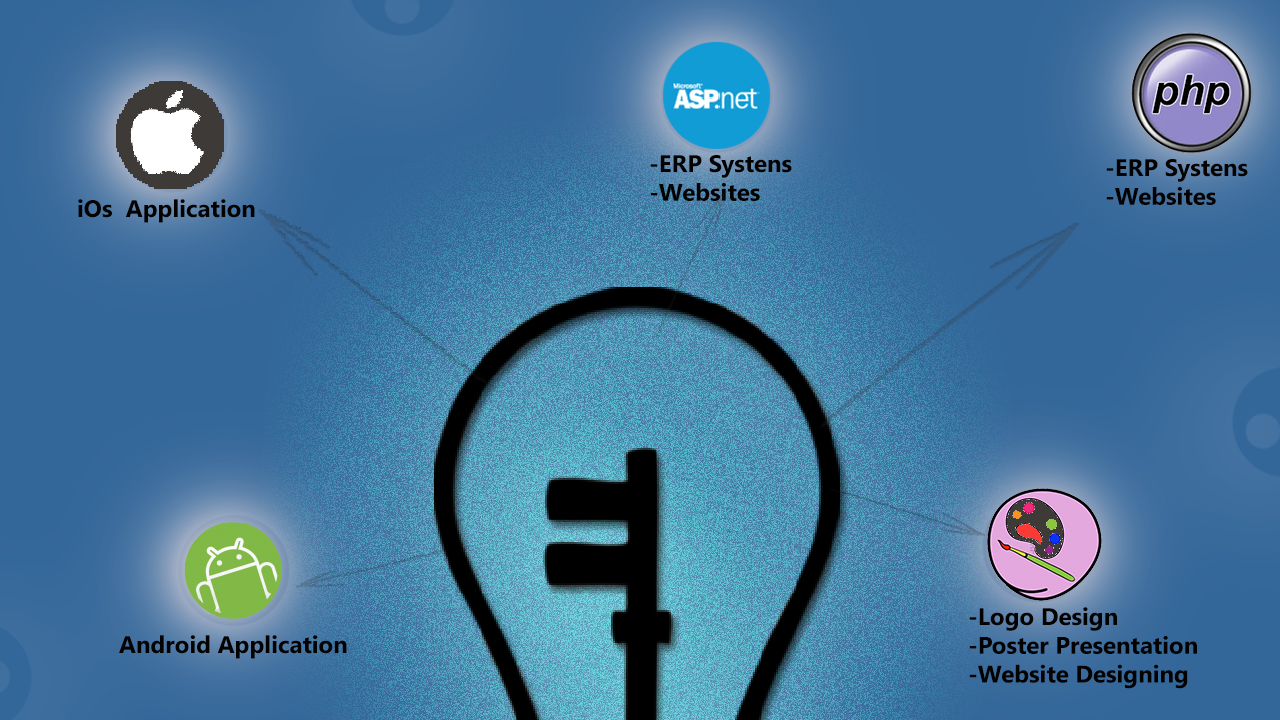
<style>
.page{position:relative;width:1280px;height:720px}
.page>*{position:absolute;margin:0}
.t1{font:24px "SegoeUI-Bold";color:#040201}
</style>
<div class="page">
<p class="t1" style="left:650px;top:155px;width:142px;height:46px">-ERP Systens<br>-Websites</p>
<p class="t1" style="left:1106px;top:159px;width:142px;height:46px">-ERP Systens <br>-Websites</p>
<p class="t1" style="left:78px;top:199px;width:177px;height:24px">iOs  Application</p>
<p class="t1" style="left:969px;top:607px;width:228px;height:82px">-Logo Design<br>-Poster Presentation<br>-Website Designing</p>
<p class="t1" style="left:119px;top:635px;width:228px;height:24px">Android Application</p>
</div>
